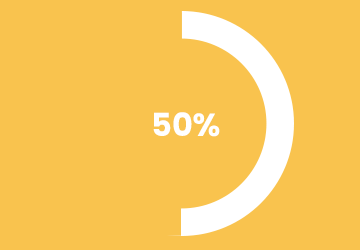
<style>
.page{position:relative;width:360px;height:250px;background:#f9c34e}
.page>*{position:absolute;margin:0}
.t1{font:31.9px "Poppins-Bold";color:#ffffff}
</style>
<div class="page">
<p class="t1" style="left:153px;top:112px;width:67px;height:25px">50%</p>
</div>
